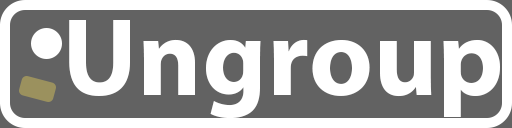
<style>
.page{position:relative;width:512px;height:128px;background:#626262}
.page>*{position:absolute;margin:0}
.t1{font:111px "MyriadPro-Bold";color:#ffffff}
</style>
<div class="page">
<p class="t1" style="left:69px;top:20px;width:431px;height:99px">Ungroup</p>
</div>
